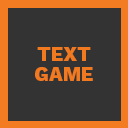
<style>
.page{position:relative;width:128px;height:128px;background:#333333}
.page>*{position:absolute;margin:0}
.t1{font:20px/20px "WorkSans-ExtraBold";color:#f17a21}
</style>
<div class="page">
<p class="t1" style="left:35px;top:47px;width:58px;height:34px;text-align:center">TEXT<br>GAME</p>
</div>
